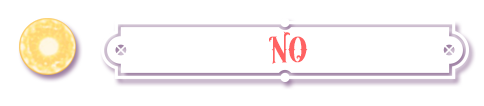
<style>
.page{position:relative;width:484px;height:106px;background:#ffffff}
.page>*{position:absolute;margin:0}
.t1{font:41.7px "Moyers";color:#ff6262}
</style>
<div class="page">
<p class="t1" style="left:269px;top:31px;width:39px;height:33px">NO</p>
</div>
